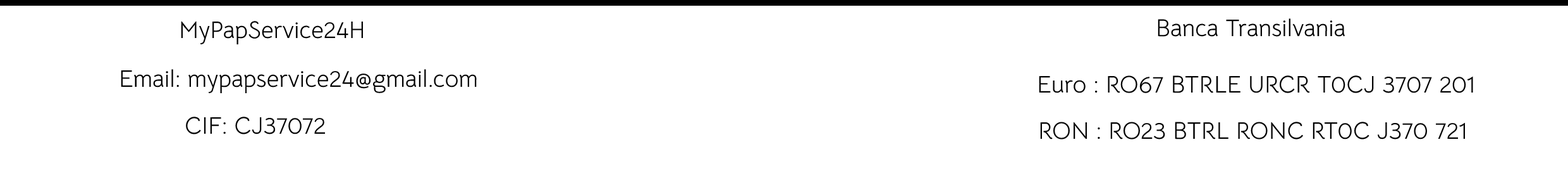
<style>
.page{position:relative;width:1568px;height:187px;background:#ffffff}
.page>*{position:absolute;margin:0}
.t1{font:24px "BellotaText-Regular";color:#000000}
</style>
<div class="page">
<p class="t1" style="left:181px;top:21px;width:183px;height:23px">MyPapService24H</p>
<p class="t1" style="left:1158px;top:18px;width:187px;height:19px">Banca Transilvania</p>
<p class="t1" style="left:121px;top:69px;width:356px;height:24px">Email: mypapservice24@gmail.com</p>
<p class="t1" style="left:1039px;top:75px;width:434px;height:18px">Euro : RO67 BTRLE URCR T0CJ 3707 201</p>
<p class="t1" style="left:186px;top:116px;width:140px;height:18px">CIF: CJ37072</p>
<p class="t1" style="left:1040px;top:121px;width:425px;height:18px">RON : RO23 BTRL RONC RT0C J370 721</p>
</div>
